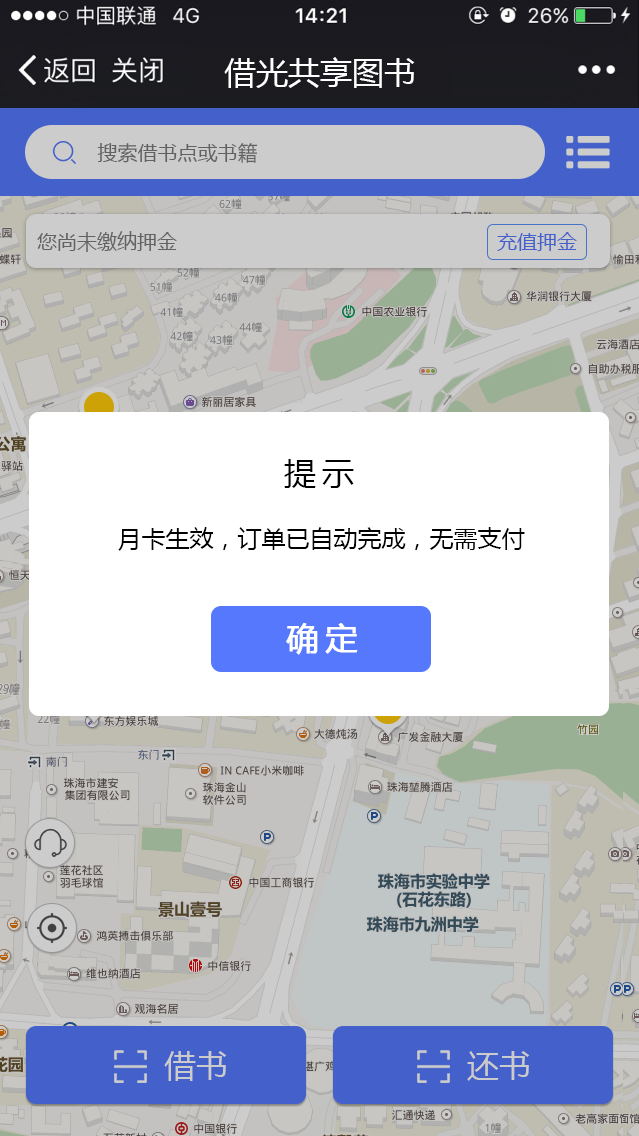
<style>
.page{position:relative;width:639px;height:1136px;background:#ffffff}
.page>*{position:absolute;margin:0}
.t1{font:20px "MicrosoftYaHei";color:#7a7a7a}
.t2{font:20px "MicrosoftYaHei";color:#4460ca}
.t3{font:32px "MicrosoftYaHei";letter-spacing:0.2em;color:#000000}
.t4{font:24px "MicrosoftYaHei";color:#000000}
.t5{font:32px "MicrosoftYaHei";letter-spacing:0.2em;color:#ffffff;font-weight:bold}
.t6{font:32px "MicrosoftYaHei";color:#cbcbcb}
</style>
<div class="page">
<p class="t1" style="left:97px;top:143px;width:161px;height:20px">搜索借书点或书籍</p>
<p class="t1" style="left:37px;top:231px;width:140px;height:21px">您尚未缴纳押金</p>
<p class="t2" style="left:497px;top:232px;width:80px;height:19px">充值押金</p>
<p class="t3" style="left:284px;top:459px;width:70px;height:29px">提示</p>
<p class="t4" style="left:118px;top:527px;width:407px;height:24px">月卡生效，订单已自动完成，无需支付</p>
<p class="t5" style="left:286px;top:623px;width:72px;height:32px">确定</p>
<p class="t6" style="left:164px;top:1051px;width:63px;height:30px">借书</p>
<p class="t6" style="left:467px;top:1051px;width:63px;height:30px">还书</p>
</div>
